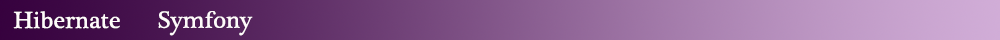
<style>
.page{position:relative;width:1000px;height:40px}
.page>*{position:absolute;margin:0}
.t1{font:24px "PlantagenetCherokee";letter-spacing:0.005em;color:#fffbfb}
</style>
<div class="page">
<p class="t1" style="left:13px;top:11px;width:107px;height:18px">Hibernate</p>
<p class="t1" style="left:158px;top:11px;width:95px;height:25px">Symfony</p>
</div>
